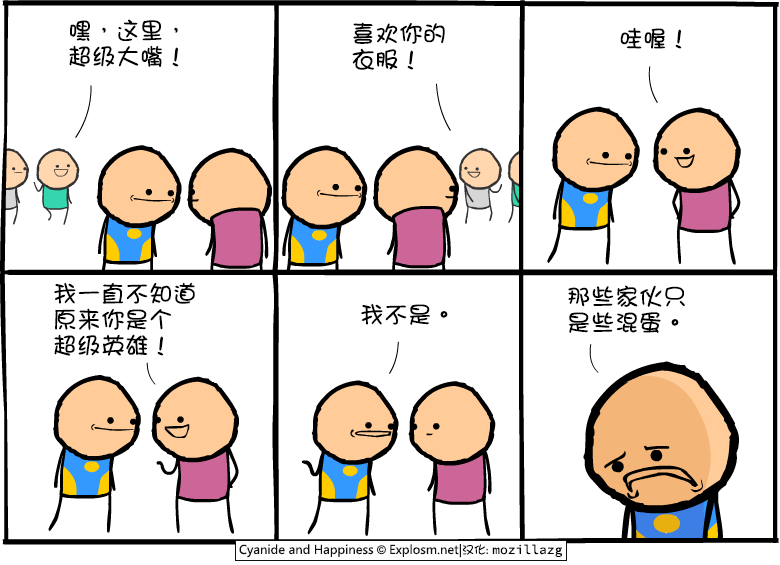
<style>
.page{position:relative;width:780px;height:565px;background:#ffffff}
.page>*{position:absolute;margin:0}
.t1{font:24px/26px "DFGirl";color:#000000}
.t2{font:24px "DFGirl";color:#000000}
</style>
<div class="page">
<p class="t1" style="left:69px;top:19px;width:110px;height:48px">嘿，这里，<br>超级大嘴！</p>
<p class="t1" style="left:352px;top:22px;width:93px;height:48px">喜欢你的<br>衣服！</p>
<p class="t2" style="left:620px;top:27px;width:62px;height:22px">哇喔！</p>
<p class="t1" style="left:54px;top:282px;width:141px;height:74px">我一直不知道<br>原来你是个<br>超级英雄！</p>
<p class="t1" style="left:568px;top:285px;width:117px;height:48px">那些家伙只<br>是些混蛋。</p>
<p class="t2" style="left:361px;top:303px;width:87px;height:22px">我不是。</p>
</div>
